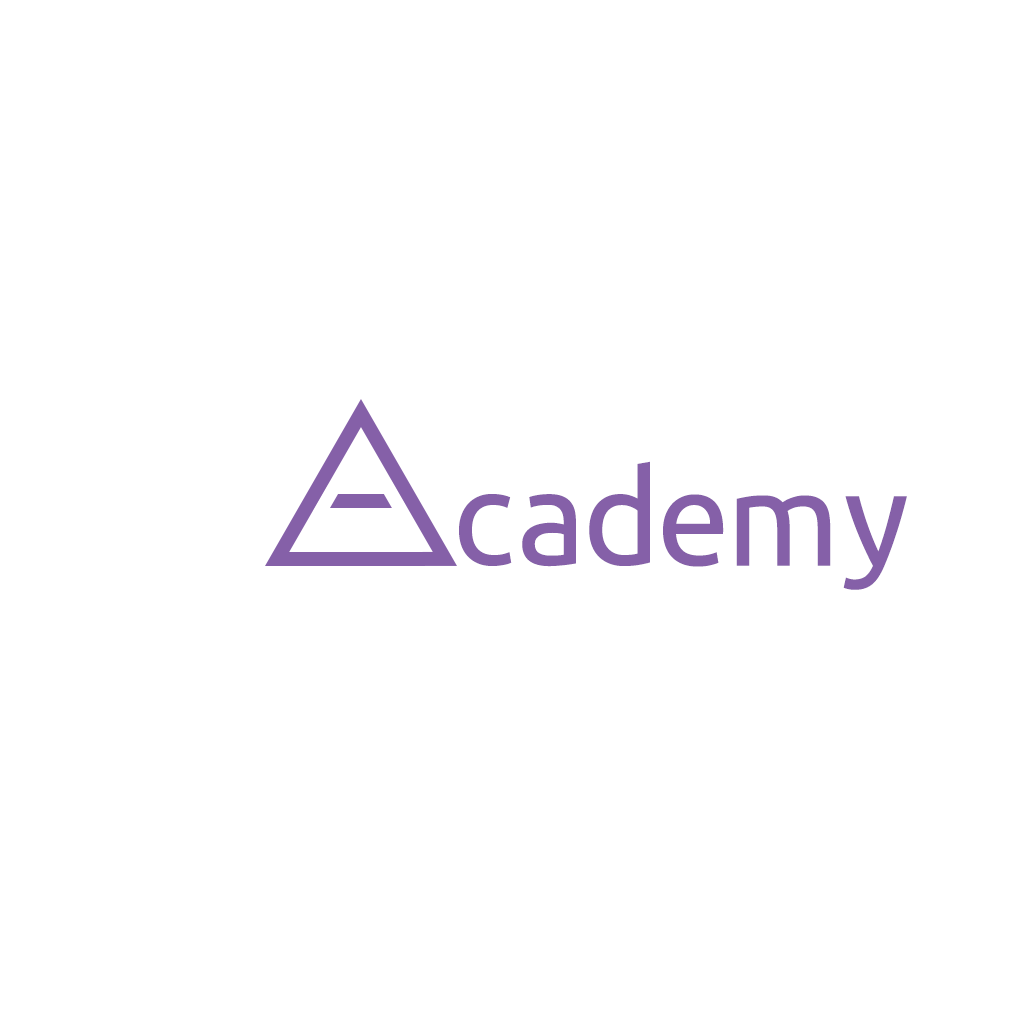
<style>
.page{position:relative;width:1024px;height:1024px;background:#ffffff}
.page>*{position:absolute;margin:0}
.t1{font:132px "Ubuntu";color:#8560a8}
</style>
<div class="page">
<p class="t1" style="left:589px;top:461px;width:61px;height:105px">d</p>
<p class="t1" style="left:459px;top:494px;width:53px;height:72px">c</p>
<p class="t1" style="left:522px;top:494px;width:54px;height:73px">a</p>
<p class="t1" style="left:663px;top:494px;width:61px;height:73px">e</p>
<p class="t1" style="left:736px;top:495px;width:95px;height:71px">m</p>
<p class="t1" style="left:843px;top:496px;width:64px;height:94px">y</p>
</div>
